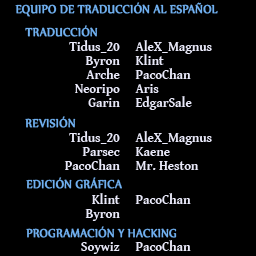
<style>
.page{position:relative;width:256px;height:256px;background:#000000}
.page>*{position:absolute;margin:0}
.t1{font:14px "Nyala-Regular";color:#70b0f0;font-weight:bold;scale:0.9 1}
.t2{font:14px/14px "GentiumBookBasic-Bold";color:#e8e8f8;scale:0.9 1}
.t3{font:14px "GentiumBookBasic-Bold";color:#e8e8f8;scale:0.9 1}
</style>
<div class="page">
<p class="t1" style="left:15px;top:2px;width:203px;height:15px">EQUIPO DE TRADUCCIÓN AL ESPAÑOL</p>
<p class="t1" style="left:25px;top:25px;width:73px;height:12px">TRADUCCIÓN</p>
<p class="t2" style="left:69px;top:40px;width:51px;height:67px;text-align:right">Tidus_20<br>Byron<br>Arche<br>Neoripo<br>Garin</p>
<p class="t2" style="left:135px;top:40px;width:77px;height:70px">AleX_Magnus<br>Klint<br>PacoChan<br>Aris<br>EdgarSale</p>
<p class="t1" style="left:25px;top:116px;width:51px;height:12px">REVISIÓN</p>
<p class="t2" style="left:64px;top:131px;width:56px;height:39px;text-align:right">Tidus_20<br>Parsec<br>PacoChan</p>
<p class="t2" style="left:135px;top:131px;width:77px;height:39px">AleX_Magnus<br>Kaene<br>Mr. Heston</p>
<p class="t1" style="left:26px;top:177px;width:96px;height:12px">EDICIÓN GRÁFICA</p>
<p class="t2" style="left:85px;top:193px;width:35px;height:28px;text-align:right">Klint<br>Byron</p>
<p class="t3" style="left:135px;top:193px;width:56px;height:11px">PacoChan</p>
<p class="t1" style="left:26px;top:226px;width:151px;height:12px">PROGRAMACIÓN Y HACKING</p>
<p class="t3" style="left:81px;top:242px;width:39px;height:12px">Soywiz</p>
<p class="t3" style="left:135px;top:240px;width:56px;height:11px">PacoChan</p>
</div>
